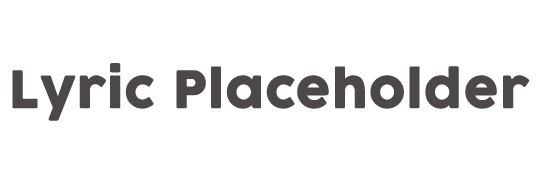
<style>
.page{position:relative;width:540px;height:180px;background:#ffffff}
.page>*{position:absolute;margin:0}
.t1{font:50px "CocogoosePro";color:#4c4848;font-weight:bold}
</style>
<div class="page">
<p class="t1" style="left:12px;top:63px;width:518px;height:58px">Lyric Placeholder</p>
</div>
